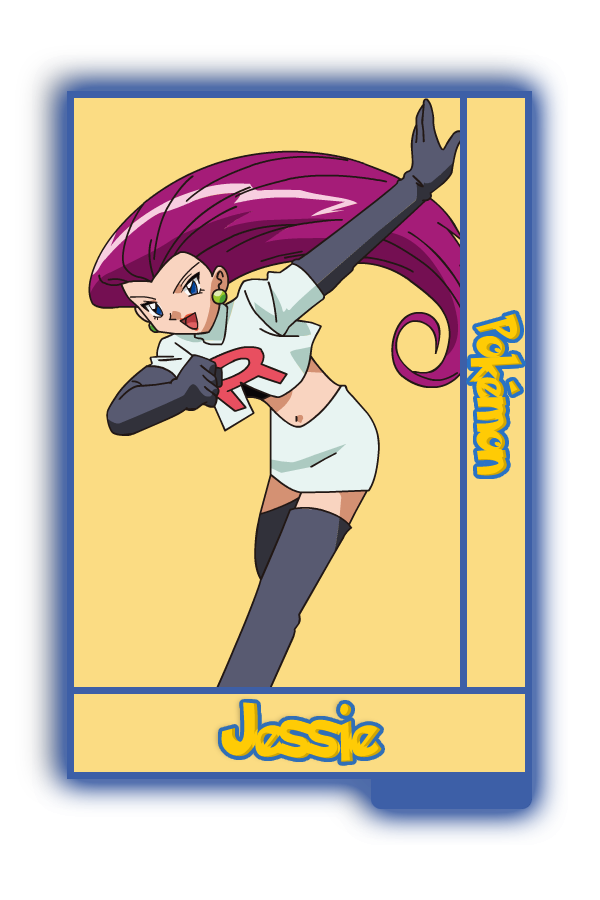
<style>
.page{position:relative;width:600px;height:900px;background:#fbdc83}
.page>*{position:absolute;margin:0}
.t1{font:48.8px "PokemonSolidNormal";color:#ffcb05;scale:0.8 1}
.t2{font:56.6px "PokemonSolidNormal";color:#ffcb05;scale:0.92 1}
</style>
<div class="page">
<p class="t1" style="left:469px;top:313px;width:54px;height:163px;rotate:90deg">Pokémon</p>
<p class="t2" style="left:221px;top:702px;width:161px;height:60px">Jessie</p>
</div>
